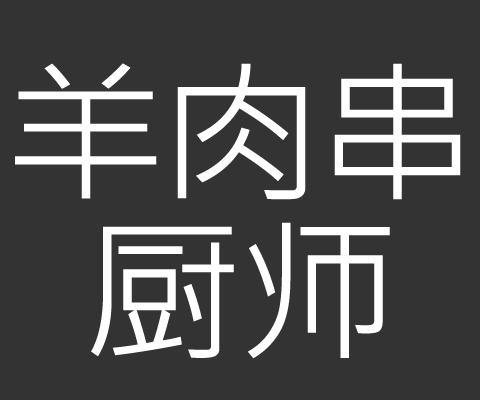
<style>
.page{position:relative;width:480px;height:400px;background:#333333}
.page>*{position:absolute;margin:0}
.t1{font:153.9px/158.9px "MicrosoftJhengHeiUIRegular";letter-spacing:-0.04em;color:#ffffff;scale:1.05 1}
</style>
<div class="page">
<p class="t1" style="left:15px;top:63px;width:446px;height:296px;text-align:center">羊肉串<br>厨师</p>
</div>
